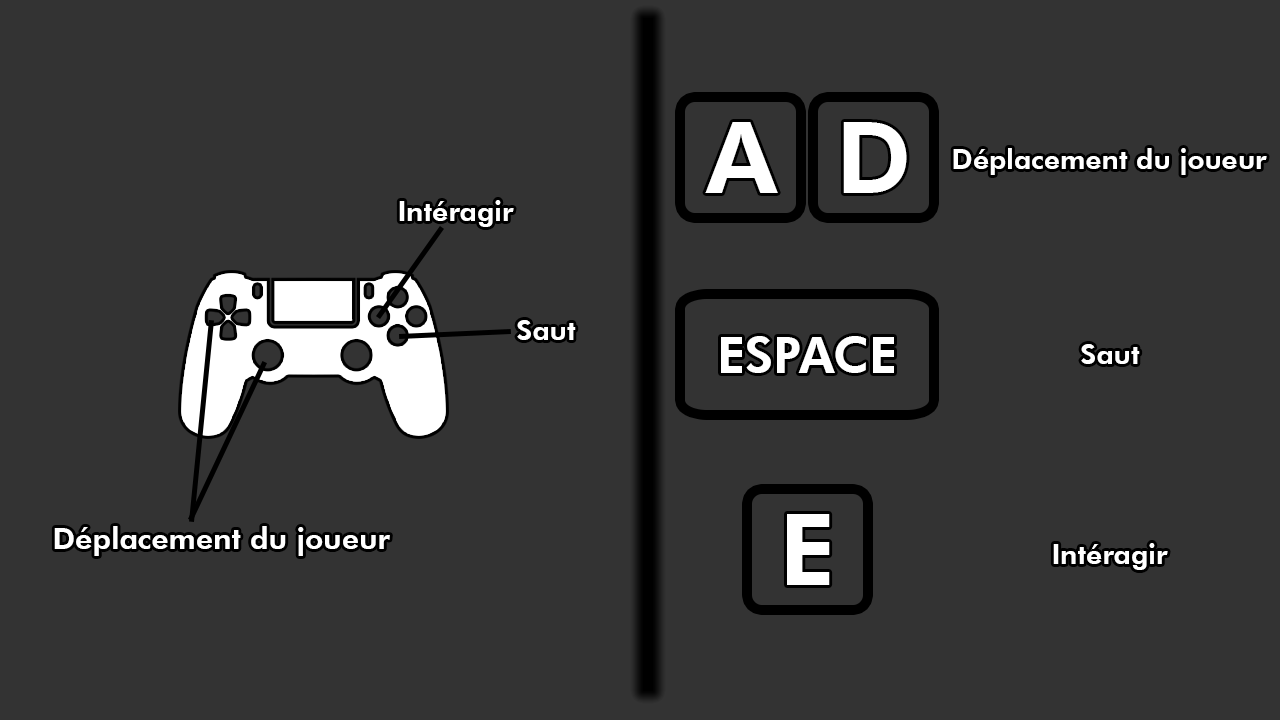
<style>
.page{position:relative;width:1280px;height:720px;background:#333333}
.page>*{position:absolute;margin:0}
.t1{font:100px "FuturaBT-Heavy";color:#ffffff}
.t2{font:28px "FuturaBT-Heavy";color:#ffffff}
.t3{font:50px "FuturaBT-Heavy";color:#ffffff}
.t4{font:30px "FuturaBT-Heavy";color:#ffffff}
</style>
<div class="page">
<p class="t1" style="left:705px;top:122px;width:73px;height:71px">A</p>
<p class="t1" style="left:843px;top:122px;width:64px;height:71px">D</p>
<p class="t2" style="left:953px;top:148px;width:314px;height:27px">Déplacement du joueur</p>
<p class="t2" style="left:399px;top:200px;width:115px;height:27px">Intéragir</p>
<p class="t2" style="left:517px;top:320px;width:59px;height:20px">Saut</p>
<p class="t3" style="left:721px;top:336px;width:173px;height:37px">ESPACE</p>
<p class="t2" style="left:1081px;top:344px;width:59px;height:20px">Saut</p>
<p class="t1" style="left:787px;top:514px;width:43px;height:71px">E</p>
<p class="t4" style="left:54px;top:526px;width:336px;height:30px">Déplacement du joueur</p>
<p class="t2" style="left:1053px;top:543px;width:115px;height:27px">Intéragir</p>
</div>
